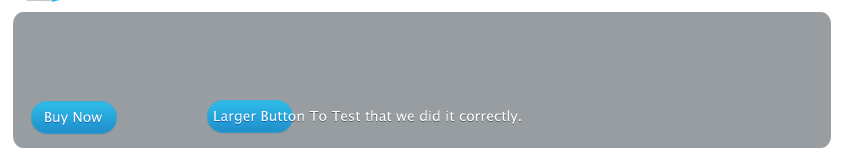
<style>
.page{position:relative;width:849px;height:159px;background:#979da0}
.page>*{position:absolute;margin:0}
.t1{font:14px "LucidaSansUnicode";color:#ffffff}
</style>
<div class="page">
<p class="t1" style="left:45px;top:112px;width:57px;height:13px">Buy Now</p>
<p class="t1" style="left:214px;top:110px;width:307px;height:14px">Larger Button To Test that we did it correctly.</p>
</div>
